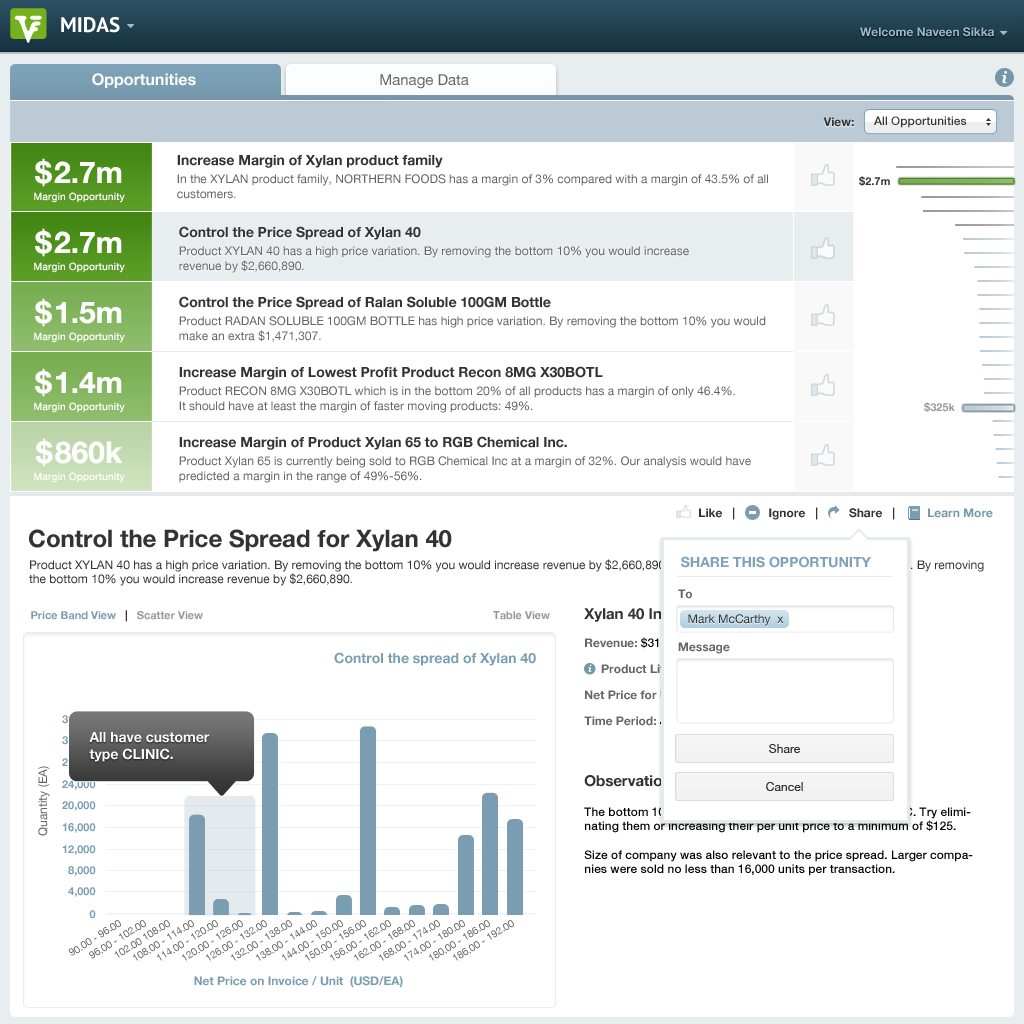
<style>
.page{position:relative;width:1024px;height:1024px;background:#ffffff}
.page>*{position:absolute;margin:0}
.t1{font:21px "PTSans-Bold";color:#ffffff}
.t2{font:12px "HelveticaNeue-Bold";color:#9db9cb}
.t3{font:16px "HelveticaNeue-Bold";color:#fdfdfd}
.t4{font:15px "HelveticaNeue";color:#666666}
.t5{font:16px "Georgia-BoldItalic";letter-spacing:0.025em;color:#ffffff}
.t6{font:12px "HelveticaNeue-Bold";color:#333333}
.t7{font:12px "HelveticaNeue-Medium";color:#333333}
.t8{font:30px "HelveticaNeue-Bold";color:#fefefe}
.t9{font:30px "HelveticaNeue-Bold";letter-spacing:0.075em;color:#fefefe}
.t10{font:12px "HelveticaNeue";color:#666666}
.t11{font:14px "HelveticaNeue-Bold";color:#333333}
.t12{font:11px "HelveticaNeue-Bold";color:#333333}
.t13{font:10px "HelveticaNeue";letter-spacing:0.025em;color:#fefefe}
.t14{font:11px "HelveticaNeue-Bold";color:#999999}
.t15{font:12px "HelveticaNeue-Bold";color:#7598ac}
.t16{font:24px "HelveticaNeue-Bold";color:#333333}
.t17{font:14px "HelveticaNeue-Bold";color:#7ea3b8}
.t18{font:12px "HelveticaNeue";color:#333333}
.t19{font:12px "HelveticaNeue-Bold";color:#666666}
.t20{font:11px "HelveticaNeue-Bold";color:#7a9db2}
.t21{font:15px "HelveticaNeue-Bold"}
.t22{font:12px/26px "HelveticaNeue-Bold"}
.t23{font:12px/26px "HelveticaNeue-Medium"}
.t24{font:14px "HelveticaNeue-Bold";color:#7a9fb3}
.t25{font:9.7px "Georgia-BoldItalic";letter-spacing:0.025em;color:#ffffff}
.t26{font:14px/17px "HelveticaNeue-Bold";color:#fafbfc}
.t27{font:12px "HelveticaNeue";letter-spacing:0.005em;color:#333333}
.t28{font:11px "HelveticaNeue-Bold";color:#7a9eb2}
.t29{font:15px "HelveticaNeue-Bold";color:#333333}
.t30{font:12px "HelveticaNeue-Medium";color:#000000}
.t31{font:10px "HelveticaNeue";color:#666666}
.t32{font:12px "HelveticaNeue-Bold";color:#7a9db2}
</style>
<div class="page">
<p class="t1" style="left:61px;top:17px;width:59px;height:16px">MIDAS</p>
<p class="t2" style="left:860px;top:27px;width:134px;height:10px">Welcome Naveen Sikka</p>
<p class="t3" style="left:92px;top:73px;width:104px;height:15px">Opportunities</p>
<p class="t4" style="left:380px;top:74px;width:89px;height:15px">Manage Data</p>
<p class="t5" style="left:1001px;top:71px;width:6px;height:13px">i</p>
<p class="t6" style="left:823px;top:117px;width:31px;height:10px">View:</p>
<p class="t7" style="left:874px;top:116px;width:93px;height:12px">All Opportunities</p>
<p class="t8" style="left:35px;top:158px;width:87px;height:29px"><span class="t9">$</span>2.7m</p>
<p class="t10" style="left:177px;top:155px;width:591px;height:44px"><span class="t11">Increase Margin of Xylan product family<br></span>In the XYLAN product family, NORTHERN FOODS has a margin of 3% compared with a margin of 43.5% of all<br>customers.</p>
<p class="t12" style="left:859px;top:176px;width:31px;height:10px">$2.7m</p>
<p class="t13" style="left:34px;top:192px;width:91px;height:11px">Margin Opportunity</p>
<p class="t8" style="left:35px;top:228px;width:87px;height:29px"><span class="t9">$</span>2.7m</p>
<p class="t10" style="left:179px;top:226px;width:510px;height:47px"><span class="t11">Control the Price Spread of Xylan 40<br></span>Product XYLAN 40 has a high price variation. By removing the bottom 10% you would increase <br>revenue by $2,660,890.</p>
<p class="t13" style="left:34px;top:262px;width:91px;height:11px">Margin Opportunity</p>
<p class="t8" style="left:35px;top:298px;width:87px;height:29px"><span class="t9">$</span>1.5m</p>
<p class="t10" style="left:179px;top:296px;width:587px;height:46px"><span class="t11">Control the Price Spread of Ralan Soluble 100GM Bottle<br></span>Product RADAN SOLUBLE 100GM BOTTLE has high price variation. By removing the bottom 10% you would <br>make an extra $1,471,307.</p>
<p class="t13" style="left:34px;top:332px;width:91px;height:11px">Margin Opportunity</p>
<p class="t10" style="left:179px;top:366px;width:556px;height:47px"><span class="t11">Increase Margin of Lowest Profit Product Recon 8MG X30BOTL<br></span>Product RECON 8MG X30BOTL which is in the bottom 20% of all products has a margin of only 46.4%. <br>It should have at least the margin of faster moving products: 49%.</p>
<p class="t8" style="left:35px;top:368px;width:87px;height:29px"><span class="t9">$</span>1.4m</p>
<p class="t13" style="left:34px;top:402px;width:91px;height:11px">Margin Opportunity</p>
<p class="t14" style="left:924px;top:402px;width:31px;height:10px">$325k</p>
<p class="t8" style="left:35px;top:438px;width:88px;height:29px"><span class="t9">$</span>860k</p>
<p class="t10" style="left:179px;top:436px;width:572px;height:47px"><span class="t11">Increase Margin of Product Xylan 65 to RGB Chemical Inc.<br></span>Product Xylan 65 is currently being sold to RGB Chemical Inc at a margin of 32%. Our analysis would have<br>predicted a margin in the range of 49%-56%.</p>
<p class="t13" style="left:34px;top:472px;width:91px;height:11px">Margin Opportunity</p>
<p class="t6" style="left:699px;top:507px;width:36px;height:13px">Like   |</p>
<p class="t6" style="left:769px;top:507px;width:49px;height:13px">Ignore   |</p>
<p class="t6" style="left:849px;top:507px;width:46px;height:13px">Share   |</p>
<p class="t15" style="left:928px;top:508px;width:65px;height:10px">Learn More</p>
<p class="t16" style="left:29px;top:529px;width:423px;height:23px">Control the Price Spread for Xylan 40</p>
<p class="t17" style="left:681px;top:556px;width:190px;height:12px">SHARE THIS OPPORTUNITY</p>
<p class="t18" style="left:29px;top:559px;width:955px;height:27px">Product XYLAN 40 has a high price variation. By removing the bottom 10% you would increase revenue by $2,660,890. Product XYLAN 40 has a high price variation. By removing the bottom 10% you would increase revenue by $2,660,890.</p>
<p class="t19" style="left:678px;top:589px;width:14px;height:10px">To</p>
<p class="t20" style="left:31px;top:610px;width:172px;height:12px">Price Band View   <span class="t12">|   </span><span class="t14">Scatter View</span></p>
<p class="t14" style="left:493px;top:611px;width:57px;height:9px">Table View</p>
<p class="t21" style="left:584px;top:608px;width:147px;height:14px">Xylan 40 Information</p>
<p class="t18" style="left:688px;top:614px;width:96px;height:12px">Mark McCarthy  x</p>
<p class="t22" style="left:584px;top:637px;width:221px;height:89px">Revenue: <span class="t23">$31,415,466<br></span>     Product Lifecycle: <span class="t23">No Data Provided<br></span>Net Price for Unit: <span class="t23">$108 - $114<br></span>Time Period: <span class="t23">Jan 2011 - Jan 2012</span></p>
<p class="t24" style="left:334px;top:652px;width:202px;height:14px">Control the spread of Xylan 40</p>
<p class="t19" style="left:678px;top:642px;width:52px;height:12px">Message</p>
<p class="t25" style="left:588px;top:664px;width:4px;height:8px">i</p>
<p class="t26" style="left:89px;top:732px;width:121px;height:30px">All have customer<br>type CLINIC.</p>
<p class="t27" style="left:769px;top:744px;width:31px;height:9px">Share</p>
<p class="t10" style="left:38px;top:766px;width:12px;height:70px;rotate:-90deg">Quantity (EA)</p>
<p class="t28" style="left:62px;top:780px;width:34px;height:10px">24,000</p>
<p class="t29" style="left:584px;top:775px;width:95px;height:12px">Observations</p>
<p class="t27" style="left:766px;top:782px;width:37px;height:9px">Cancel</p>
<p class="t28" style="left:62px;top:801px;width:34px;height:10px">20,000</p>
<p class="t30" style="left:584px;top:807px;width:389px;height:69px">The bottom 10% performers all have customer type CLINIC. Try eliminating them or increasing their per unit price to a minimum of $125.<br><br>Size of company was also relevant to the price spread. Larger companies were sold no less than 16,000 units per transaction.</p>
<p class="t28" style="left:62px;top:823px;width:34px;height:10px">16,000</p>
<p class="t28" style="left:62px;top:845px;width:34px;height:10px">12,000</p>
<p class="t28" style="left:68px;top:866px;width:28px;height:10px">8,000</p>
<p class="t28" style="left:68px;top:887px;width:28px;height:10px">4,000</p>
<p class="t28" style="left:89px;top:910px;width:7px;height:9px">0</p>
<p class="t31" style="left:68px;top:920px;width:53px;height:36px;rotate:-32deg">90.00 - 96.00</p>
<p class="t31" style="left:89px;top:920px;width:57px;height:39px;rotate:-32deg">96.00 - 102.00</p>
<p class="t31" style="left:114px;top:920px;width:56px;height:38px;rotate:-32deg">102.00 108.00</p>
<p class="t31" style="left:132px;top:920px;width:62px;height:41px;rotate:-32deg">108.00 - 114.00</p>
<p class="t31" style="left:156px;top:920px;width:62px;height:41px;rotate:-32deg">114.00 - 120.00</p>
<p class="t31" style="left:181px;top:920px;width:62px;height:41px;rotate:-32deg">120.00 - 126.00</p>
<p class="t31" style="left:205px;top:920px;width:62px;height:41px;rotate:-32deg">126.00 - 132.00</p>
<p class="t31" style="left:230px;top:920px;width:62px;height:41px;rotate:-32deg">132.00 - 138.00</p>
<p class="t31" style="left:255px;top:920px;width:62px;height:41px;rotate:-32deg">138.00 - 144.00</p>
<p class="t31" style="left:281px;top:920px;width:62px;height:41px;rotate:-32deg">144.00 - 150.00</p>
<p class="t31" style="left:304px;top:920px;width:62px;height:41px;rotate:-32deg">150.00 - 156.00</p>
<p class="t31" style="left:329px;top:920px;width:62px;height:41px;rotate:-32deg">156.00 - 162.00</p>
<p class="t31" style="left:353px;top:920px;width:62px;height:41px;rotate:-32deg">162.00 - 168.00</p>
<p class="t31" style="left:378px;top:920px;width:62px;height:41px;rotate:-32deg">168.00 - 174.00</p>
<p class="t31" style="left:403px;top:920px;width:62px;height:41px;rotate:-32deg">174.00 - 180.00</p>
<p class="t31" style="left:428px;top:920px;width:62px;height:41px;rotate:-32deg">180.00 - 186.00</p>
<p class="t31" style="left:452px;top:920px;width:62px;height:41px;rotate:-32deg">186.00 - 192.00</p>
<p class="t32" style="left:194px;top:976px;width:209px;height:12px">Net Price on Invoice / Unit  (USD/EA)</p>
</div>
